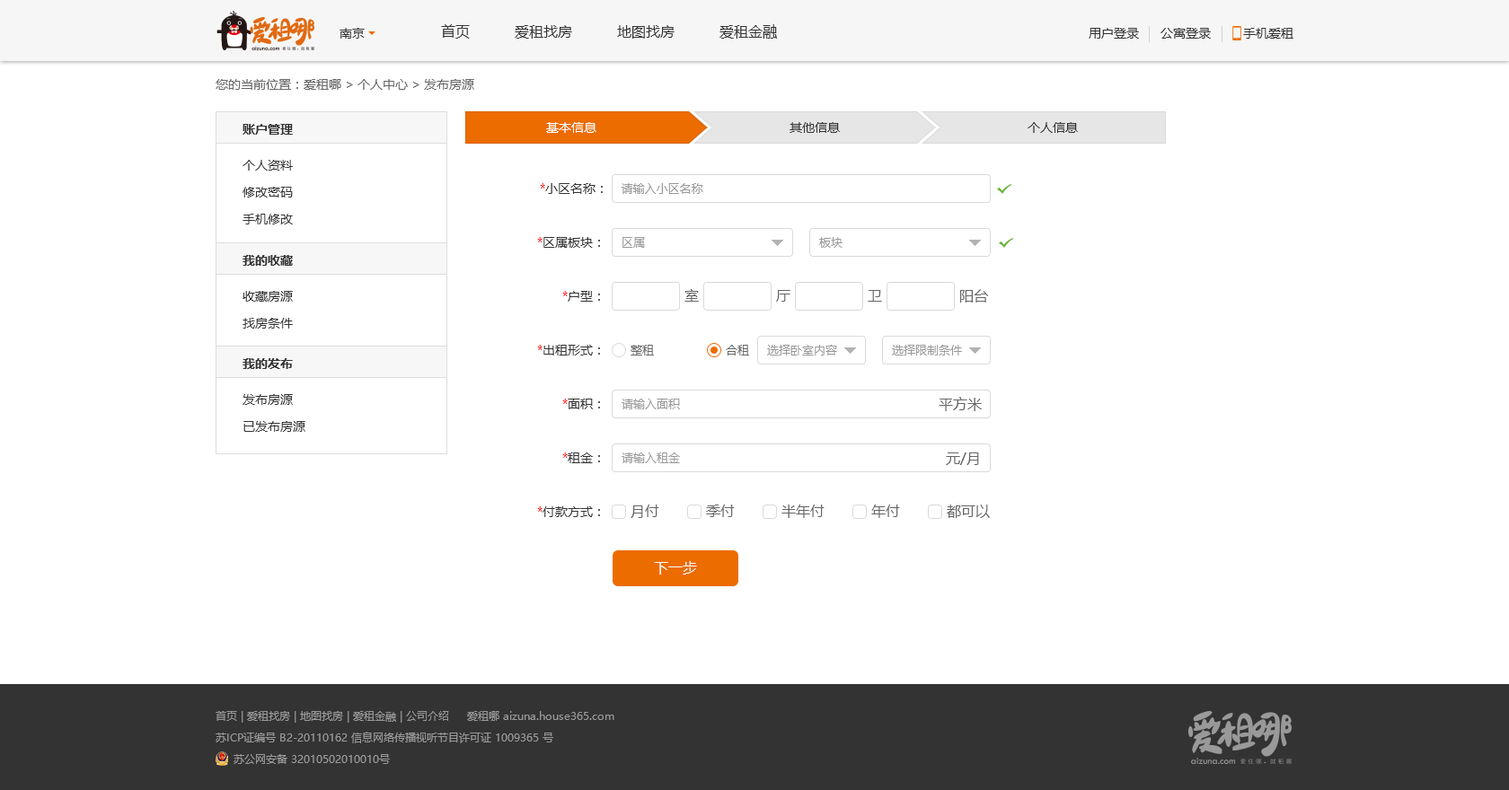
<style>
.page{position:relative;width:1509px;height:790px;background:#ffffff}
.page>*{position:absolute;margin:0}
.t1{font:12.6px "MicrosoftYaHei";color:#333333}
.t2{font:14.4px "MicrosoftYaHei";color:#333333}
.t3{font:12.6px "MicrosoftYaHei";color:#666666}
.t4{font:12.6px "MicrosoftYaHei-Bold";color:#333333}
.t5{font:12.6px "MicrosoftYaHei";color:#ffffff}
.t6{font:12.6px/26.9px "MicrosoftYaHei";color:#333333}
.t7{font:12.6px "MicrosoftYaHei";color:#ff0000}
.t8{font:11.7px "MicrosoftYaHei";color:#999999}
.t9{font:14.4px "MicrosoftYaHei";color:#666666}
.t10{font:11.7px "MicrosoftYaHei";color:#666666}
.t11{font:14.4px "MicrosoftYaHei";color:#ffffff}
.t12{font:10.8px/21.6px "MicrosoftYaHei";color:#999999}
</style>
<div class="page">
<p class="t1" style="left:339px;top:28px;width:26px;height:11px">南京</p>
<p class="t2" style="left:441px;top:24px;width:336px;height:15px">首页          爱租找房          地图找房          爱租金融</p>
<p class="t1" style="left:1088px;top:28px;width:205px;height:11px">用户登录      公寓登录         手机爱租</p>
<p class="t3" style="left:216px;top:79px;width:258px;height:11px">您的当前位置：爱租哪 &gt; 个人中心 &gt; 发布房源</p>
<p class="t4" style="left:242px;top:124px;width:51px;height:11px">账户管理</p>
<p class="t5" style="left:546px;top:122px;width:50px;height:11px">基本信息</p>
<p class="t5" style="left:546px;top:122px;width:50px;height:11px">基本信息</p>
<p class="t1" style="left:789px;top:122px;width:51px;height:11px">其他信息</p>
<p class="t1" style="left:1027px;top:122px;width:51px;height:11px">个人信息</p>
<p class="t6" style="left:242px;top:160px;width:51px;height:65px">个人资料<br>修改密码<br>手机修改</p>
<p class="t1" style="left:540px;top:183px;width:63px;height:11px"><span class="t7">*</span>小区名称：</p>
<p class="t8" style="left:621px;top:183px;width:82px;height:11px">请输入小区名称</p>
<p class="t1" style="left:537px;top:237px;width:63px;height:11px"><span class="t7">*</span>区属板块：</p>
<p class="t8" style="left:622px;top:237px;width:23px;height:11px">区属</p>
<p class="t8" style="left:819px;top:237px;width:23px;height:11px">板块</p>
<p class="t4" style="left:242px;top:255px;width:51px;height:11px">我的收藏</p>
<p class="t6" style="left:242px;top:291px;width:51px;height:38px">收藏房源<br>找房条件</p>
<p class="t1" style="left:562px;top:291px;width:38px;height:11px"><span class="t7">*</span>户型：</p>
<p class="t9" style="left:684px;top:289px;width:15px;height:13px">室</p>
<p class="t9" style="left:776px;top:290px;width:14px;height:12px">厅</p>
<p class="t9" style="left:868px;top:290px;width:14px;height:12px">卫</p>
<p class="t9" style="left:960px;top:289px;width:28px;height:14px">阳台</p>
<p class="t1" style="left:537px;top:345px;width:63px;height:11px"><span class="t7">*</span>出租形式：</p>
<p class="t10" style="left:630px;top:345px;width:24px;height:11px">整租</p>
<p class="t10" style="left:726px;top:345px;width:23px;height:11px">合租</p>
<p class="t8" style="left:767px;top:345px;width:70px;height:11px">选择卧室内容</p>
<p class="t8" style="left:892px;top:345px;width:70px;height:11px">选择限制条件</p>
<p class="t4" style="left:242px;top:358px;width:51px;height:11px">我的发布</p>
<p class="t6" style="left:242px;top:394px;width:63px;height:38px">发布房源<br>已发布房源</p>
<p class="t1" style="left:562px;top:399px;width:38px;height:11px"><span class="t7">*</span>面积：</p>
<p class="t8" style="left:621px;top:399px;width:59px;height:11px">请输入面积</p>
<p class="t9" style="left:939px;top:397px;width:43px;height:14px">平方米</p>
<p class="t1" style="left:562px;top:453px;width:38px;height:10px"><span class="t7">*</span>租金：</p>
<p class="t8" style="left:621px;top:453px;width:59px;height:10px">请输入租金</p>
<p class="t9" style="left:946px;top:453px;width:33px;height:12px">元/月</p>
<p class="t1" style="left:537px;top:507px;width:63px;height:10px"><span class="t7">*</span>付款方式：</p>
<p class="t9" style="left:630px;top:505px;width:29px;height:13px">月付</p>
<p class="t9" style="left:706px;top:505px;width:29px;height:12px">季付</p>
<p class="t9" style="left:781px;top:505px;width:43px;height:13px">半年付</p>
<p class="t9" style="left:871px;top:505px;width:29px;height:13px">年付</p>
<p class="t9" style="left:947px;top:505px;width:43px;height:13px">都可以</p>
<p class="t11" style="left:654px;top:561px;width:43px;height:14px">下一步</p>
<p class="t12" style="left:216px;top:711px;width:398px;height:53px">首页 | 爱租找房 | 地图找房 | 爱租金融 | 公司介绍     爱租哪 aizuna.house365.com<br>苏ICP证编号 B2-20110162 信息网络传播视听节目许可证 1009365 号<br>     苏公网安备 32010502010010号</p>
</div>
